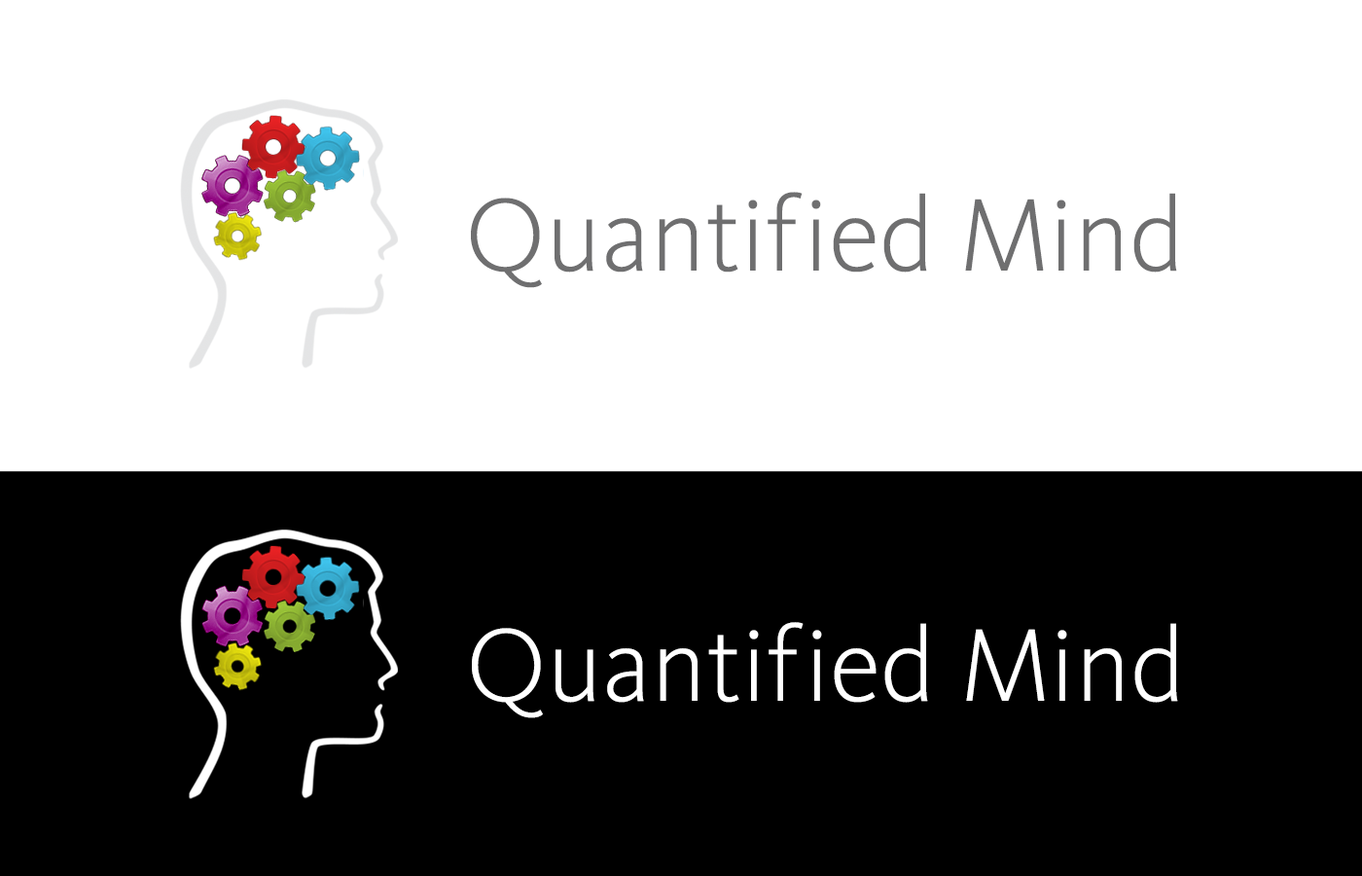
<style>
.page{position:relative;width:1362px;height:876px;background:#ffffff}
.page>*{position:absolute;margin:0}
.t1{font:107px "KievitOT-Light";color:#6f6f70}
.t2{font:107px "KievitOT-Light";color:#ffffff}
</style>
<div class="page">
<p class="t1" style="left:471px;top:192px;width:706px;height:96px">Quantif ied Mind</p>
<p class="t2" style="left:472px;top:622px;width:706px;height:96px">Quantif ied Mind</p>
</div>
